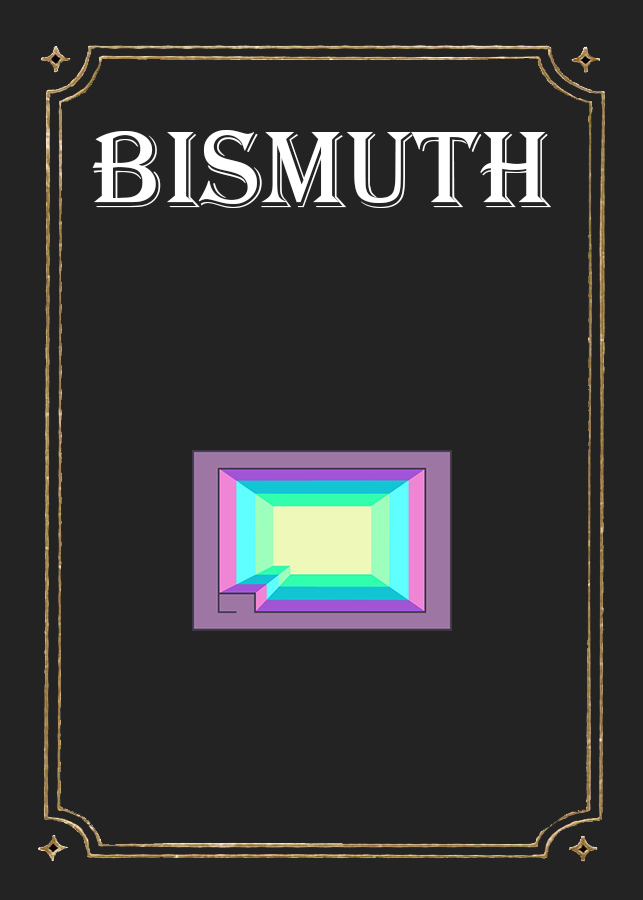
<style>
.page{position:relative;width:643px;height:900px;background:#232323}
.page>*{position:absolute;margin:0}
.t1{font:113.3px "Algerian";color:#ffffff}
</style>
<div class="page">
<p class="t1" style="left:92px;top:130px;width:459px;height:78px">Bismuth</p>
</div>
